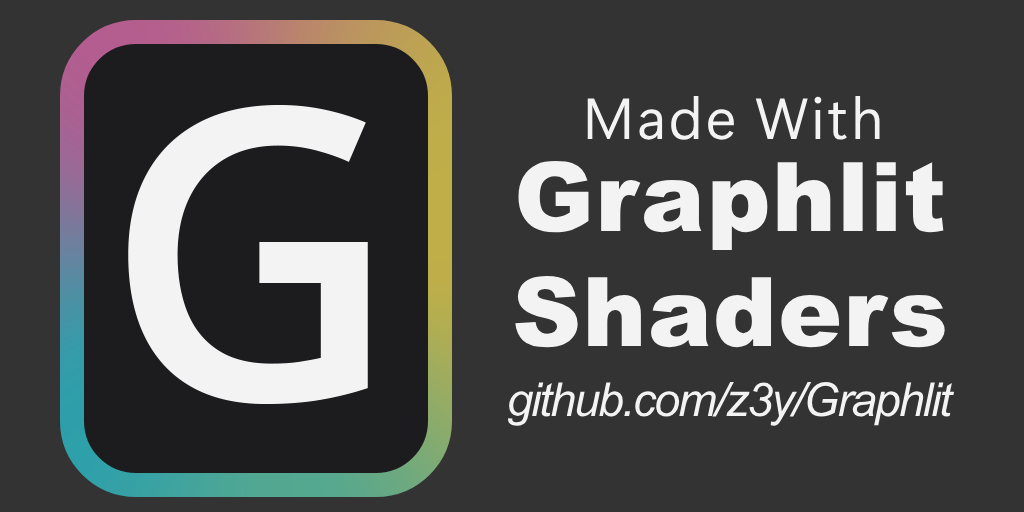
<style>
.page{position:relative;width:1024px;height:512px;background:#333333}
.page>*{position:absolute;margin:0}
.t1{font:58px "SegoeUIVariable-RegularDisplay";letter-spacing:0.05em;color:#f3f3f4}
.t2{font:406.7px "OpenSansRoman-SemiBold";letter-spacing:0.15em;color:#f3f3f4}
.t3{font:96px "Arial-Black";letter-spacing:0.012em;color:#f3f3f4}
.t4{font:46.7px "Arial-ItalicMT";letter-spacing:-0.044em;color:#f3f3f4}
</style>
<div class="page">
<p class="t1" style="left:587px;top:96px;width:293px;height:44px">Made With</p>
<p class="t2" style="left:128px;top:105px;width:240px;height:299px">G</p>
<p class="t3" style="left:515px;top:161px;width:430px;height:187px;text-align:center">Graphlit<br>Shaders</p>
<p class="t4" style="left:508px;top:382px;width:447px;height:44px">github.com/z3y/Graphlit</p>
</div>
